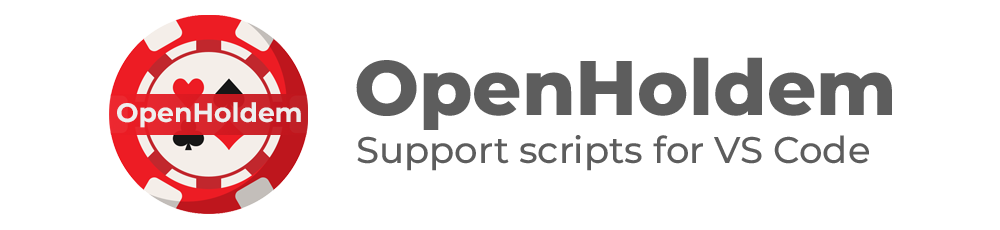
<style>
.page{position:relative;width:1000px;height:230px;background:#ffffff}
.page>*{position:absolute;margin:0}
.t1{font:77px "Montserrat-ExtraBold";color:#5d5d5d}
.t2{font:26.7px "Montserrat-Bold";color:#eeeeee}
.t3{font:37px "Montserrat-Medium";color:#5d5d5d}
</style>
<div class="page">
<p class="t1" style="left:356px;top:57px;width:536px;height:73px">OpenHoldem</p>
<p class="t2" style="left:117px;top:102px;width:184px;height:26px">OpenHoldem</p>
<p class="t3" style="left:357px;top:135px;width:512px;height:36px">Support scripts for VS Code</p>
</div>
